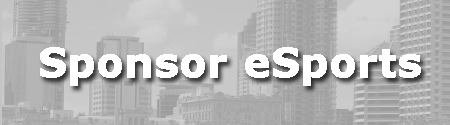
<style>
.page{position:relative;width:450px;height:125px}
.page>*{position:absolute;margin:0}
.t1{font:40px "Verdana-Bold";color:#ffffff;font-weight:bold}
</style>
<div class="page">
<p class="t1" style="left:40px;top:47px;width:381px;height:39px">Sponsor eSports</p>
</div>
